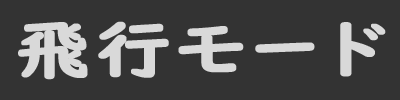
<style>
.page{position:relative;width:400px;height:100px;background:#333333}
.page>*{position:absolute;margin:0}
.t1{font:63.8px "UDDigiKyokashoNK-B";letter-spacing:0.05em;color:#d9d9d9;font-weight:bold;scale:1.18 1}
</style>
<div class="page">
<p class="t1" style="left:18px;top:21px;width:368px;height:59px">飛行モード</p>
</div>
